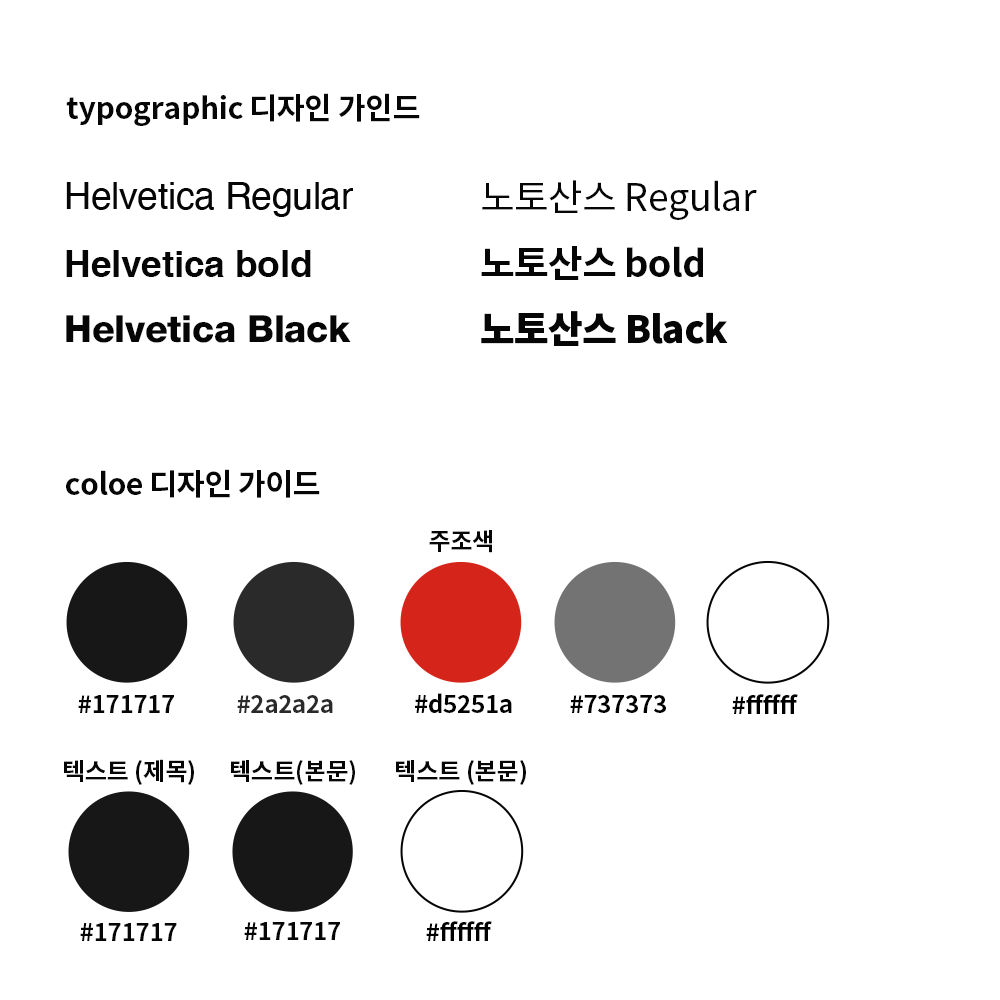
<style>
.page{position:relative;width:1000px;height:1000px;background:#ffffff}
.page>*{position:absolute;margin:0}
.t1{font:30px "NotoSansKR-Bold";letter-spacing:-0.01em;color:#060606}
.t2{font:37.4px "Helvetica";letter-spacing:-0.01em;color:#060606}
.t3{font:37.4px "NotoSansKR-Regular";letter-spacing:-0.01em;color:#060606}
.t4{font:37.4px "NotoSansKR-Bold";letter-spacing:-0.01em;color:#060606}
.t5{font:37.4px "Helvetica-Bold";letter-spacing:-0.01em;color:#060606}
.t6{font:37.4px "Helvetica85-Heavy";letter-spacing:-0.01em;color:#060606}
.t7{font:37.4px "NotoSansKR-Black";letter-spacing:-0.01em;color:#060606}
.t8{font:24.2px "NotoSansKR-Bold";letter-spacing:-0.01em;color:#060606}
.t9{font:24px "NotoSansKR-Bold";letter-spacing:-0.01em;color:#060606}
.t10{font:24px "NotoSansKR-Bold";letter-spacing:-0.01em;color:#2a2a2a}
.t11{font:24.2px "NotoSansKR-Bold";letter-spacing:-0.01em;color:#010101}
.t12{font:24px "NotoSansKR-Bold";letter-spacing:-0.01em;color:#000000}
.t13{font:24.1px "NotoSansKR-Bold";letter-spacing:-0.01em;color:#060606}
</style>
<div class="page">
<p class="t1" style="left:66px;top:93px;width:354px;height:33px">typographic 디자인 가인드</p>
<p class="t2" style="left:66px;top:182px;width:287px;height:35px">Helvetica Regular</p>
<p class="t3" style="left:482px;top:180px;width:275px;height:40px">노토산스 Regular</p>
<p class="t4" style="left:481px;top:246px;width:222px;height:34px">노토산스 bold</p>
<p class="t5" style="left:66px;top:250px;width:245px;height:27px">Helvetica bold</p>
<p class="t6" style="left:66px;top:315px;width:285px;height:28px">Helvetica Black</p>
<p class="t7" style="left:481px;top:311px;width:247px;height:35px">노토산스 Black</p>
<p class="t1" style="left:66px;top:469px;width:254px;height:29px">coloe 디자인 가이드</p>
<p class="t8" style="left:429px;top:530px;width:63px;height:23px">주조색</p>
<p class="t9" style="left:78px;top:695px;width:96px;height:18px">#171717</p>
<p class="t10" style="left:237px;top:695px;width:96px;height:18px">#2a2a2a</p>
<p class="t11" style="left:415px;top:693px;width:97px;height:20px">#d5251a</p>
<p class="t12" style="left:570px;top:695px;width:96px;height:18px">#737373</p>
<p class="t12" style="left:732px;top:694px;width:66px;height:20px">#ffffff</p>
<p class="t8" style="left:64px;top:759px;width:130px;height:26px">텍스트 (제목)</p>
<p class="t13" style="left:231px;top:760px;width:124px;height:25px">텍스트(본문)</p>
<p class="t8" style="left:396px;top:760px;width:130px;height:25px">텍스트 (본문)</p>
<p class="t8" style="left:80px;top:923px;width:97px;height:18px">#171717</p>
<p class="t13" style="left:244px;top:922px;width:96px;height:18px">#171717</p>
<p class="t12" style="left:426px;top:921px;width:66px;height:20px">#ffffff</p>
</div>
